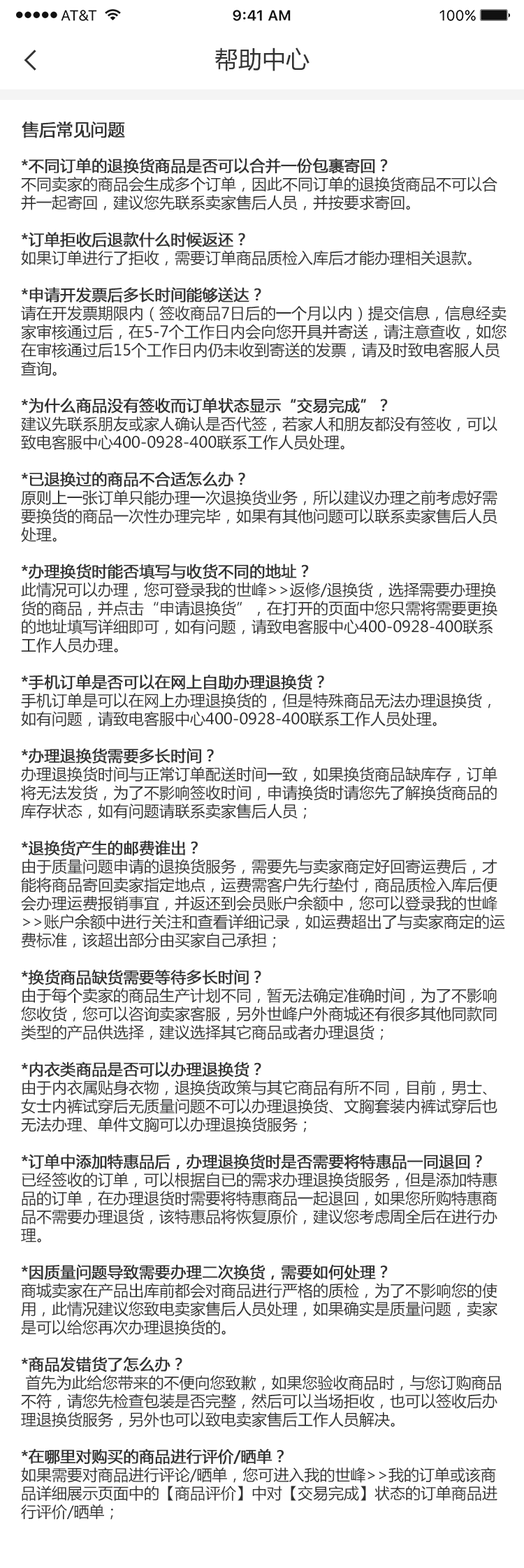
<style>
.page{position:relative;width:524px;height:1568px;background:#ffffff}
.page>*{position:absolute;margin:0}
.t1{font:23.7px "MicrosoftYaHei";color:#333333}
.t2{font:16.8px "MicrosoftYaHei";color:#333333;font-weight:bold}
.t3{font:15.4px "MicrosoftYaHei";color:#333333}
.t4{font:15.4px "MicrosoftYaHei";color:#333333;font-weight:bold}
</style>
<div class="page">
<p class="t1" style="left:215px;top:47px;width:94px;height:24px">帮助中心</p>
<p class="t2" style="left:22px;top:121px;width:103px;height:17px">售后常见问题</p>
<p class="t3" style="left:21px;top:158px;width:485px;height:1362px"><span class="t4"><br>*不同订单的退换货商品是否可以合并一份包裹寄回？</span><br>不同卖家的商品会生成多个订单，因此不同订单的退换货商品不可以合并一起寄回，建议您先联系卖家售后人员，并按要求寄回。<br><br><span class="t4">*订单拒收后退款什么时候返还？</span><br>如果订单进行了拒收，需要订单商品质检入库后才能办理相关退款。<br><br><span class="t4">*申请开发票后多长时间能够送达？</span><br>请在开发票期限内（签收商品7日后的一个月以内）提交信息，信息经卖家审核通过后，在5-7个工作日内会向您开具并寄送，请注意查收，如您在审核通过后15个工作日内仍未收到寄送的发票，请及时致电客服人员查询。<br><br><span class="t4">*为什么商品没有签收而订单状态显示“交易完成”？</span><br>建议先联系朋友或家人确认是否代签，若家人和朋友都没有签收，可以致电客服中心400-0928-400联系工作人员处理。<br><span class="t4"><br>*已退换过的商品不合适怎么办？</span><br>原则上一张订单只能办理一次退换货业务，所以建议办理之前考虑好需要换货的商品一次性办理完毕，如果有其他问题可以联系卖家售后人员处理。<br><span class="t4"><br>*办理换货时能否填写与收货不同的地址？</span><br>此情况可以办理，您可登录我的世峰&gt;&gt;返修/退换货，选择需要办理换货的商品，并点击“申请退换货”，在打开的页面中您只需将需要更换的地址填写详细即可，如有问题，请致电客服中心400-0928-400联系工作人员办理。<br><br><span class="t4">*手机订单是否可以在网上自助办理退换货？</span><br>手机订单是可以在网上办理退换货的，但是特殊商品无法办理退换货，如有问题，请致电客服中心400-0928-400联系工作人员处理。<br> <br><span class="t4">*办理退换货需要多长时间？</span><br>办理退换货时间与正常订单配送时间一致，如果换货商品缺库存，订单将无法发货，为了不影响签收时间，申请换货时请您先了解换货商品的库存状态，如有问题请联系卖家售后人员；<br><br><span class="t4">*退换货产生的邮费谁出？</span><br>由于质量问题申请的退换货服务，需要先与卖家商定好回寄运费后，才能将商品寄回卖家指定地点，运费需客户先行垫付，商品质检入库后便会办理运费报销事宜，并返还到会员账户余额中，您可以登录我的世峰&gt;&gt;账户余额中进行关注和查看详细记录，如运费超出了与卖家商定的运费标准，该超出部分由买家自己承担；<br><br><span class="t4">*换货商品缺货需要等待多长时间？</span><br>由于每个卖家的商品生产计划不同，暂无法确定准确时间，为了不影响您收货，您可以咨询卖家客服，另外世峰户外商城还有很多其他同款同类型的产品供选择，建议选择其它商品或者办理退货；<br><br><span class="t4">*内衣类商品是否可以办理退换货？</span><br>由于内衣属贴身衣物，退换货政策与其它商品有所不同，目前，男士、女士内裤试穿后无质量问题不可以办理退换货、文胸套装内裤试穿后也无法办理、单件文胸可以办理退换货服务；<br><span class="t4"><br>*订单中添加特惠品后，办理退换货时是否需要将特惠品一同退回？</span><br>已经签收的订单，可以根据自已的需求办理退换货服务，但是添加特惠品的订单，在办理退货时需要将特惠商品一起退回，如果您所购特惠商品不需要办理退货，该特惠品将恢复原价，建议您考虑周全后在进行办理。<br><br><span class="t4">*因质量问题导致需要办理二次换货，需要如何处理？</span><br>商城卖家在产品出库前都会对商品进行严格的质检，为了不影响您的使用，此情况建议您致电卖家售后人员处理，如果确实是质量问题，卖家是可以给您再次办理退换货的。<br><span class="t4"><br>*商品发错货了怎么办？</span><br> 首先为此给您带来的不便向您致歉，如果您验收商品时，与您订购商品不符，请您先检查包装是否完整，然后可以当场拒收，也可以签收后办理退换货服务，另外也可以致电卖家售后工作人员解决。<br><br><span class="t4">*在哪里对购买的商品进行评价/晒单？</span><br>如果需要对商品进行评论/晒单，您可进入我的世峰&gt;&gt;我的订单或该商品详细展示页面中的【商品评价】中对【交易完成】状态的订单商品进行评价/晒单； <br><br> <br><br>*为什么订单没有配送过，订单状态却显示为“拒收”？<br><br> 因配送给您带来的不便请谅解，如果配送员没有与您联系便私自更改配送状态，配送公司会对相关的配送员进行严厉处理，同时也感谢您将此情况反馈给我们，订单状态为“拒收”后商品将会退回卖家库房，建议您重新订购。<br><br> <br><br>*为什么交易完成后，我的积分等数据还是未成改变？<br><br>由于商城有15天退换货服务保障，因此积分、会员升级等信息数据将会在相应的订单签收15天后累计显示在个人账户中，您可登录我的世峰&gt;&gt;我的积分适时查看信息数据变化；</p>
</div>
